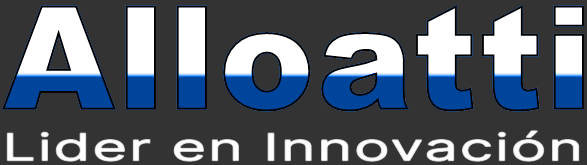
<style>
.page{position:relative;width:587px;height:165px;background:#333333}
.page>*{position:absolute;margin:0}
.t1{font:37.5px "Inter-Regular";color:#ffffff;font-weight:bold;scale:1.6 1}
</style>
<div class="page">
<p class="t1" style="left:6px;top:130px;width:574px;height:32px">Lider en Innovación</p>
</div>
